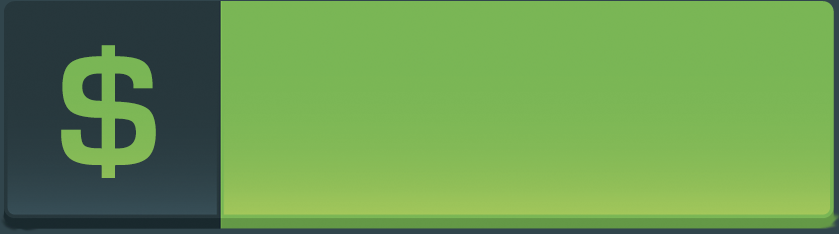
<style>
.page{position:relative;width:839px;height:234px}
.page>*{position:absolute;margin:0}
.t1{font:161.9px "EurostileBold";letter-spacing:-0.14em;color:#7db756}
</style>
<div class="page">
<p class="t1" style="left:61px;top:45px;width:95px;height:133px">$</p>
</div>
